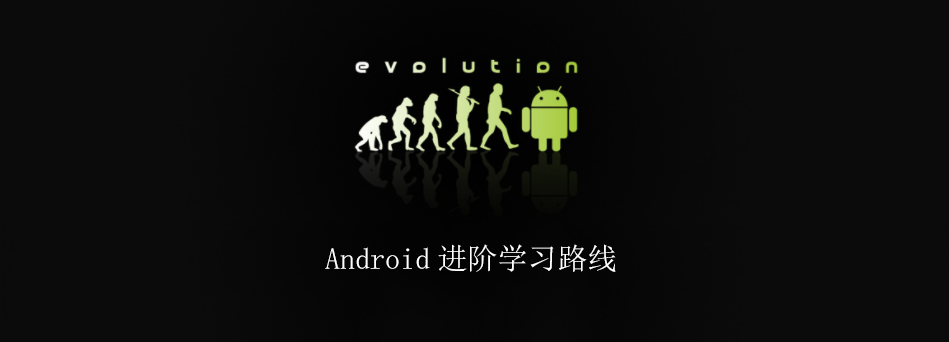
<style>
.page{position:relative;width:949px;height:342px;background:#0b0b0b}
.page>*{position:absolute;margin:0}
.t1{font:30px "SimSun";color:#ffffff}
</style>
<div class="page">
<p class="t1" style="left:325px;top:244px;width:291px;height:28px">Android进阶学习路线</p>
</div>
